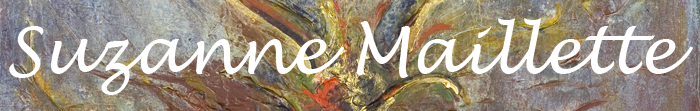
<style>
.page{position:relative;width:700px;height:111px}
.page>*{position:absolute;margin:0}
.t1{font:65px "LucidaHandwriting-Italic";color:#ffffff}
</style>
<div class="page">
<p class="t1" style="left:9px;top:18px;width:685px;height:77px">Suzanne Maillette</p>
</div>
